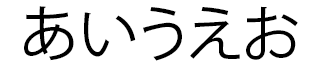
<style>
.page{position:relative;width:320px;height:64px;background:#ffffff}
.page>*{position:absolute;margin:0}
.t1{font:60px "KozGoPr6N-Regular";color:#000000}
</style>
<div class="page">
<p class="t1" style="left:24px;top:6px;width:274px;height:55px">あいうえお</p>
</div>
